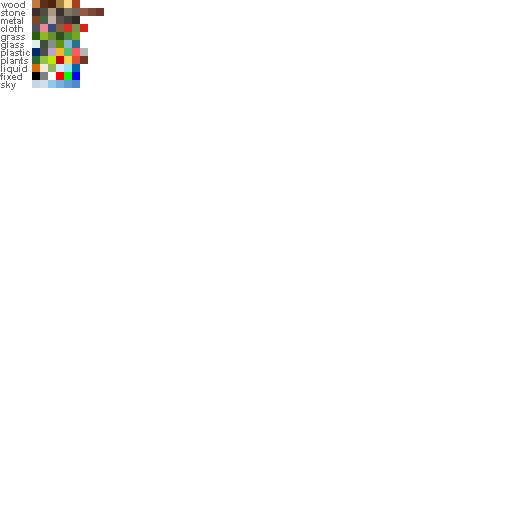
<style>
.page{position:relative;width:512px;height:512px;background:#ffffff}
.page>*{position:absolute;margin:0}
.t1{font:9px "Arial-BoldMT";color:#626262}
</style>
<div class="page">
<p class="t1" style="left:1px;top:1px;width:24px;height:7px">wood</p>
<p class="t1" style="left:1px;top:9px;width:24px;height:7px">stone</p>
<p class="t1" style="left:1px;top:17px;width:22px;height:7px">metal</p>
<p class="t1" style="left:1px;top:25px;width:22px;height:7px">cloth</p>
<p class="t1" style="left:1px;top:35px;width:24px;height:7px">grass</p>
<p class="t1" style="left:1px;top:41px;width:23px;height:9px">glass</p>
<p class="t1" style="left:1px;top:49px;width:29px;height:9px">plastic</p>
<p class="t1" style="left:1px;top:57px;width:27px;height:9px">plants</p>
<p class="t1" style="left:1px;top:65px;width:26px;height:9px">liquid</p>
<p class="t1" style="left:0px;top:73px;width:22px;height:7px">fixed</p>
<p class="t1" style="left:1px;top:81px;width:15px;height:9px">sky</p>
</div>
